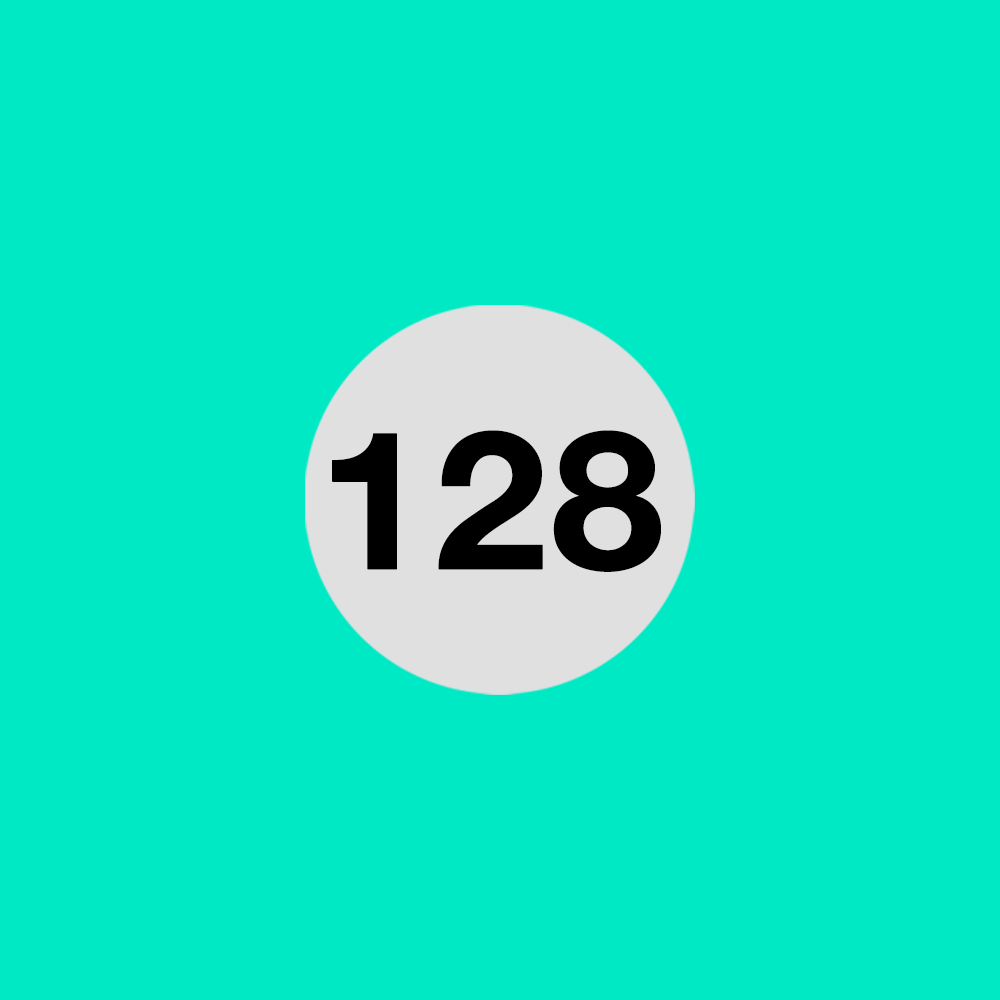
<style>
.page{position:relative;width:1000px;height:1000px;background:#00e9c5}
.page>*{position:absolute;margin:0}
.t1{font:192.9px "HelveticaNeue-Bold";color:#000000;font-weight:bold;scale:1.04 1}
</style>
<div class="page">
<p class="t1" style="left:332px;top:430px;width:329px;height:142px">128</p>
</div>
